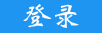
<style>
.page{position:relative;width:102px;height:33px;background:#1e95f0}
.page>*{position:absolute;margin:0}
.t1{font:30px "STXinwei";color:#fcfafa}
</style>
<div class="page">
<p class="t1" style="left:23px;top:4px;width:56px;height:24px">登录</p>
</div>
